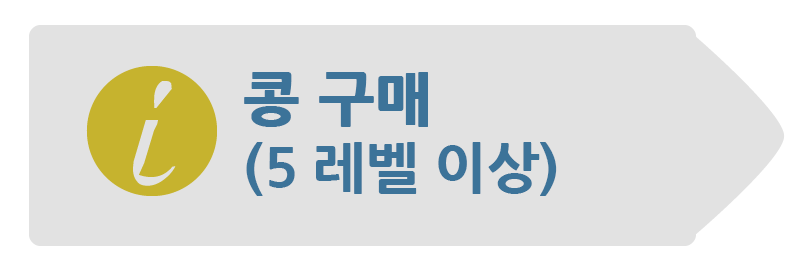
<style>
.page{position:relative;width:806px;height:270px;background:#e2e2e2}
.page>*{position:absolute;margin:0}
.t1{font:56px/71px "NanumGothicExtraBold";color:#3c7399}
.t2{font:59px/71px "NanumGothicExtraBold";color:#3c7399;font-weight:bold}
</style>
<div class="page">
<p class="t1" style="left:244px;top:72px;width:313px;height:124px;text-align:justify"><span class="t2">콩 구매<br></span>(5 레벨 이상)</p>
</div>
